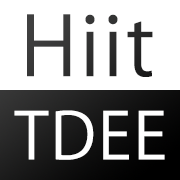
<style>
.page{position:relative;width:180px;height:180px;background:#ffffff}
.page>*{position:absolute;margin:0}
.t1{font:81.2px "KozGoPr6N-Regular";letter-spacing:0.035em;color:#323232}
.t2{font:63.5px "KozGoPr6N-Regular";letter-spacing:0.035em;color:#ffffff}
</style>
<div class="page">
<p class="t1" style="left:27px;top:14px;width:126px;height:63px">Hiit</p>
<p class="t2" style="left:14px;top:110px;width:151px;height:50px">TDEE</p>
</div>
